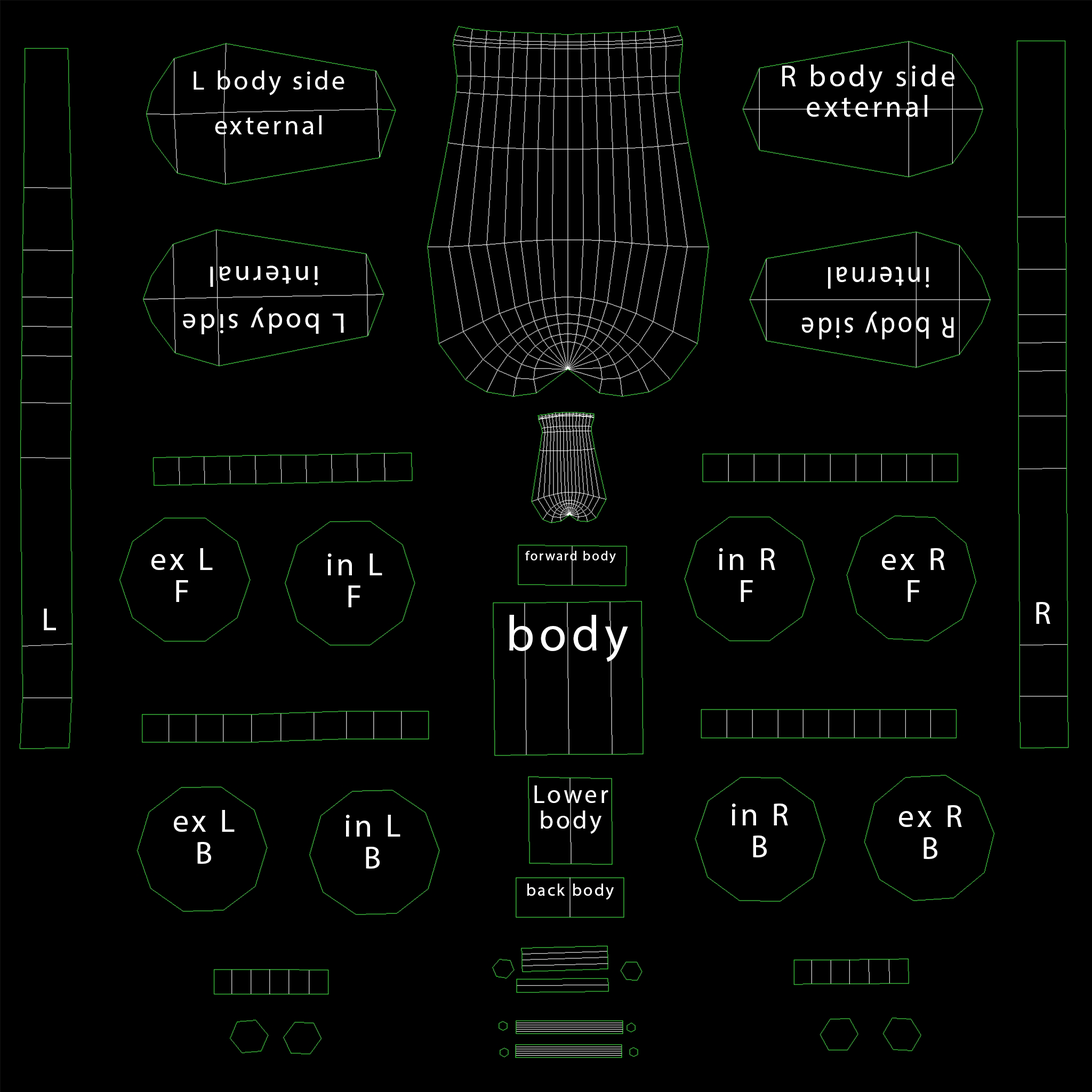
<style>
.page{position:relative;width:1092px;height:1092px;background:#000000}
.page>*{position:absolute;margin:0}
.t1{font:30.2px/30.2px "MyriadHebrew-Regular";letter-spacing:0.1em;color:#ffffff}
.t2{font:26.8px/44.6px "MyriadHebrew-Regular";letter-spacing:0.1em;color:#ffffff}
.t3{font:28.5px/47.5px "MyriadHebrew-Regular";letter-spacing:0.1em;color:#ffffff}
.t4{font:30.2px/50.4px "MyriadHebrew-Regular";letter-spacing:0.1em;color:#ffffff;scale:0.88 1}
.t5{font:32px/16px "MyriadHebrew-Regular";letter-spacing:0.1em;color:#ffffff}
.t6{font:13.4px "MyriadHebrew-Regular";letter-spacing:0.1em;color:#ffffff}
.t7{font:32px "MyriadHebrew-Regular";letter-spacing:0.1em;color:#ffffff}
.t8{font:49.9px "MyriadHebrew-Regular";letter-spacing:0.1em;color:#ffffff}
.t9{font:25.4px/25.4px "MyriadHebrew-Regular";letter-spacing:0.1em;color:#ffffff}
.t10{font:17.2px "MyriadHebrew-Regular";letter-spacing:0.1em;color:#ffffff}
</style>
<div class="page">
<p class="t1" style="left:782px;top:65px;width:172px;height:52px;text-align:center">R body side<br>external</p>
<p class="t2" style="left:194px;top:70px;width:150px;height:64px;text-align:center">L body side<br>external</p>
<p class="t3" style="left:183px;top:266px;width:161px;height:68px;text-align:center;rotate:180deg">L body side<br>internal</p>
<p class="t4" style="left:801px;top:267px;width:153px;height:73px;text-align:center;rotate:180deg">R body side<br>internal</p>
<p class="t5" style="left:151px;top:548px;width:62px;height:54px;text-align:center">ex L<br><br>F</p>
<p class="t5" style="left:328px;top:553px;width:54px;height:54px;text-align:center">in L<br><br>F</p>
<p class="t6" style="left:525px;top:551px;width:91px;height:12px">forward body</p>
<p class="t5" style="left:719px;top:548px;width:56px;height:54px;text-align:center">in R<br><br>F</p>
<p class="t5" style="left:882px;top:548px;width:63px;height:54px;text-align:center">ex R <br><br>F</p>
<p class="t7" style="left:1036px;top:602px;width:14px;height:22px">R</p>
<p class="t7" style="left:44px;top:608px;width:12px;height:22px">L</p>
<p class="t8" style="left:509px;top:615px;width:119px;height:47px">body</p>
<p class="t9" style="left:534px;top:785px;width:74px;height:49px;text-align:center">Lower body</p>
<p class="t5" style="left:174px;top:810px;width:61px;height:54px;text-align:center">ex L<br><br>B</p>
<p class="t5" style="left:732px;top:804px;width:56px;height:53px;text-align:center">in R<br><br>B</p>
<p class="t5" style="left:899px;top:805px;width:63px;height:54px;text-align:center">ex R<br><br>B</p>
<p class="t5" style="left:346px;top:815px;width:54px;height:54px;text-align:center">in L<br><br>B</p>
<p class="t10" style="left:527px;top:884px;width:87px;height:16px">back body</p>
</div>
